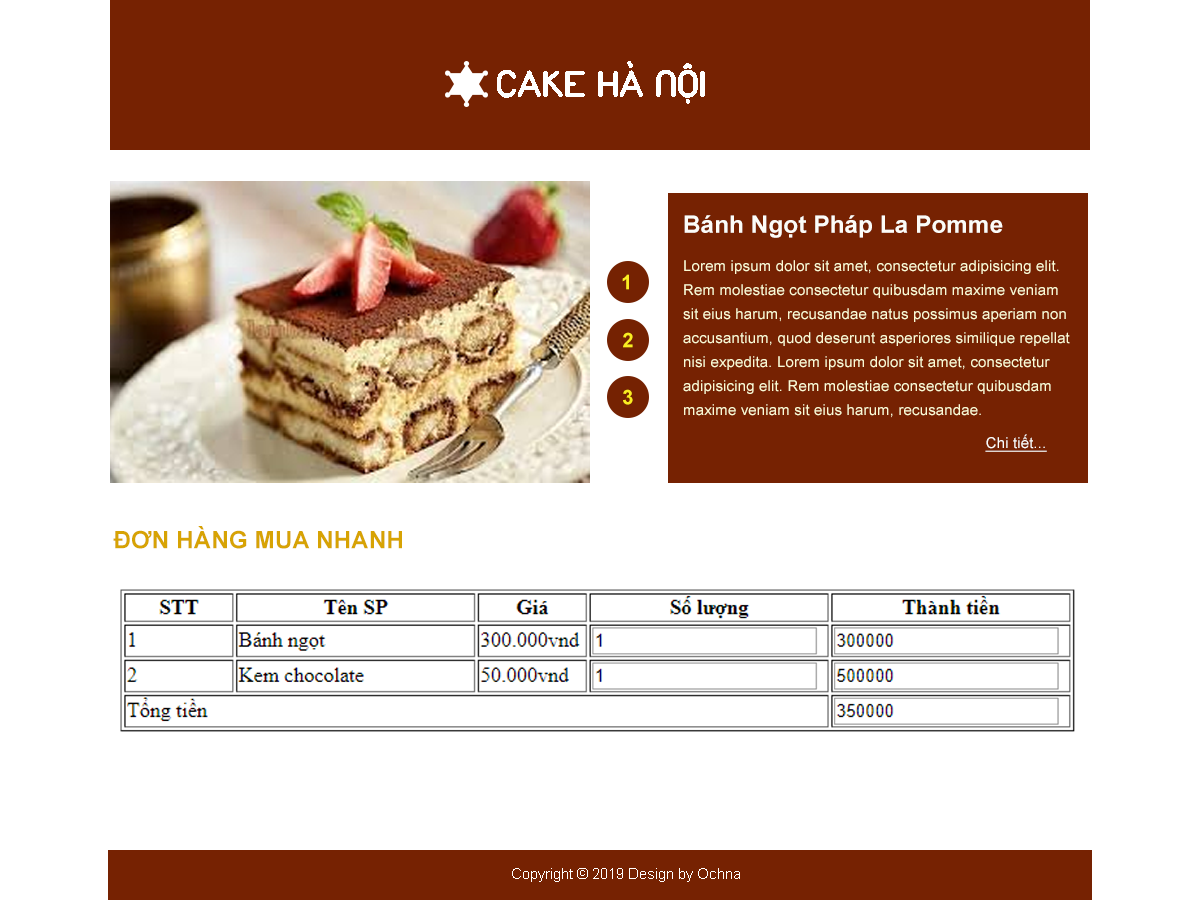
<style>
.page{position:relative;width:1200px;height:900px;background:#ffffff}
.page>*{position:absolute;margin:0}
.t1{font:40px "UTMDuepuntozeroBold";color:#ffffff}
.t2{font:24px "Arial-BoldMT";letter-spacing:0.01em;color:#fcfcf8}
.t3{font:15px/24px "ArialMT";letter-spacing:0.01em;color:#fcfad3}
.t4{font:20px "Arial-BoldMT";letter-spacing:0.01em;color:#faed22}
.t5{font:15px "ArialMT";letter-spacing:0.01em;color:#fcfcf8;text-decoration:underline}
.t6{font:24px "Arial-BoldMT";letter-spacing:0.01em;color:#d7a304}
.t7{font:15px "ArialMT";color:#ffffff}
</style>
<div class="page">
<p class="t1" style="left:497px;top:61px;width:208px;height:43px">CAKE HÀ NỘI</p>
<p class="t2" style="left:684px;top:215px;width:319px;height:23px">Bánh Ngọt Pháp La Pomme</p>
<p class="t3" style="left:683px;top:260px;width:387px;height:158px">Lorem ipsum dolor sit amet, consectetur adipisicing elit. <br>Rem molestiae consectetur quibusdam maxime veniam <br>sit eius harum, recusandae natus possimus aperiam non <br>accusantium, quod deserunt asperiores similique repellat <br>nisi expedita. Lorem ipsum dolor sit amet, consectetur <br>adipisicing elit. Rem molestiae consectetur quibusdam <br>maxime veniam sit eius harum, recusandae.</p>
<p class="t4" style="left:622px;top:274px;width:7px;height:16px">1</p>
<p class="t4" style="left:623px;top:332px;width:10px;height:16px">2</p>
<p class="t4" style="left:623px;top:389px;width:10px;height:16px">3</p>
<p class="t5" style="left:985px;top:434px;width:62px;height:18px">Chi tiết...</p>
<p class="t6" style="left:113px;top:526px;width:289px;height:23px">ĐƠN HÀNG MUA NHANH</p>
<p class="t7" style="left:512px;top:868px;width:228px;height:14px">Copyright © 2019 Design by Ochna</p>
</div>
